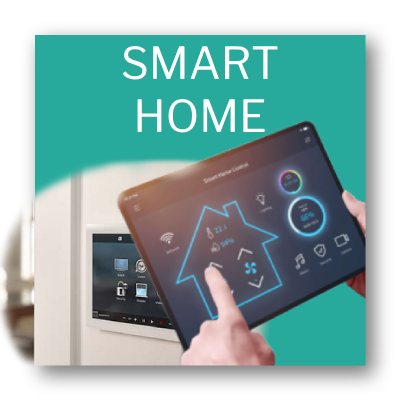
<style>
.page{position:relative;width:400px;height:400px;background:#27aa9c}
.page>*{position:absolute;margin:0}
.t1{font:44px "LibreFranklin-Regular";color:#ffffff}
</style>
<div class="page">
<p class="t1" style="left:122px;top:45px;width:156px;height:88px;text-align:center">SMART<br>HOME</p>
</div>
